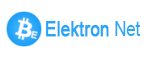
<style>
.page{position:relative;width:150px;height:57px;background:#ffffff}
.page>*{position:absolute;margin:0}
.t1{font:20.8px "ArialMT";color:#27a6f8;font-weight:bold;scale:0.8 1}
.t2{font:20.8px "ArialMT";color:#27a6f8;scale:0.8 1}
</style>
<div class="page">
<p class="t1" style="left:46px;top:21px;width:95px;height:16px">Elektron<span class="t2"> Net</span></p>
</div>
